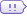
<style>
.page{position:relative;width:27px;height:16px;background:#ffffff}
.page>*{position:absolute;margin:0}
.t1{font:10.5px "Hooge0553";letter-spacing:-0.03em;color:#9480c6;font-weight:bold;scale:0.92 1}
</style>
<div class="page">
<p class="t1" style="left:9px;top:4px;width:7px;height:7px">!!</p>
</div>
